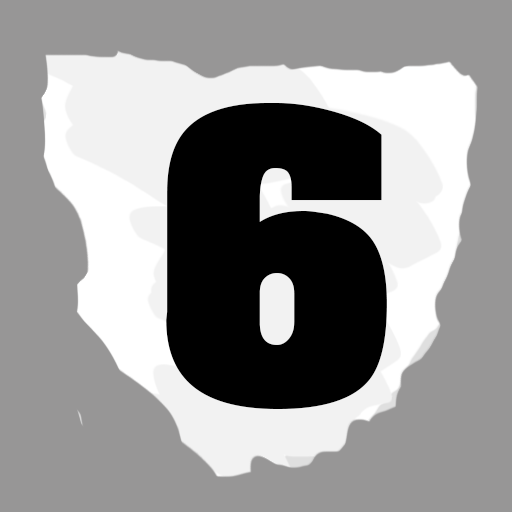
<style>
.page{position:relative;width:512px;height:512px;background:#979696}
.page>*{position:absolute;margin:0}
.t1{font:453.9px "VNI-Auchon-Bold";letter-spacing:-0.015em;color:#000000}
</style>
<div class="page">
<p class="t1" style="left:166px;top:103px;width:221px;height:306px">6</p>
</div>
